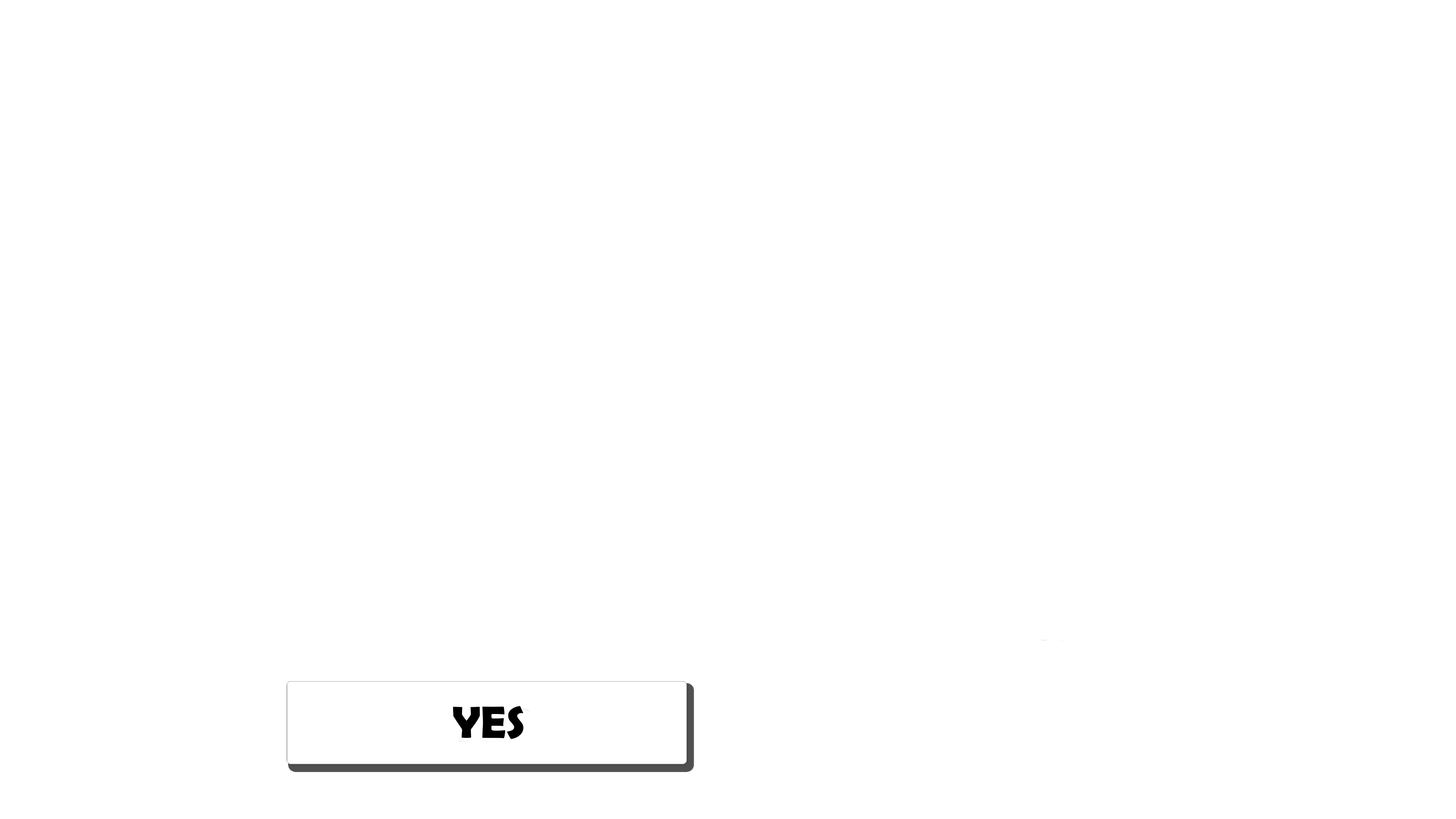
<style>
.page{position:relative;width:1456px;height:819px;background:#ffffff}
.page>*{position:absolute;margin:0}
.t1{font:45.5px "BerlinSansFBDemi-Bold";color:#000000}
</style>
<div class="page">
<p class="t1" style="left:453px;top:706px;width:71px;height:33px">YES</p>
</div>
